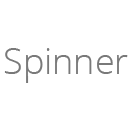
<style>
.page{position:relative;width:128px;height:128px;background:#ffffff}
.page>*{position:absolute;margin:0}
.t1{font:36px "OpenSans-Light";color:#797979}
</style>
<div class="page">
<p class="t1" style="left:4px;top:48px;width:124px;height:35px">Spinner</p>
</div>
